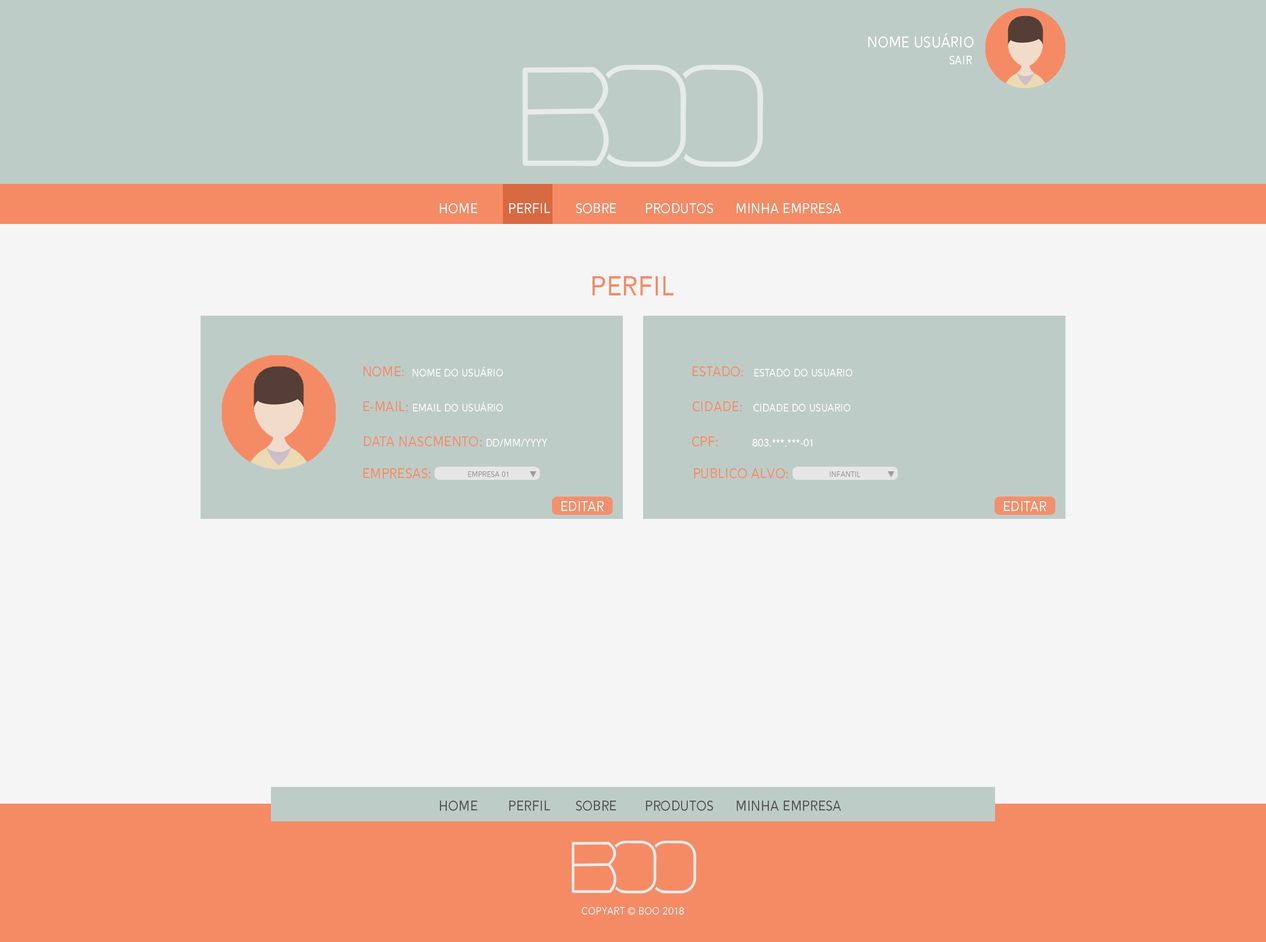
<style>
.page{position:relative;width:1266px;height:942px;background:#f5f5f5}
.page>*{position:absolute;margin:0}
.t1{font:18.3px "Alesand-Regular";color:#fffefe}
.t2{font:14.1px "Alesand-Regular";color:#fffefe}
.t3{font:16.9px "Alesand-Regular";color:#fffefe}
.t4{font:33.8px "Alesand-Regular";color:#f58b65}
.t5{font:16.9px "Alesand-Regular";color:#f58b65}
.t6{font:12.7px "Alesand-Regular";color:#fffefe}
.t7{font:9.2px "Alesand-Regular";color:#9e9b9b}
.t8{font:16.9px "Alesand-Regular";color:#f5f5f5}
.t9{font:16.9px "Alesand-Regular";color:#525050}
.t10{font:12.7px "Alesand-Regular";color:#efefef}
</style>
<div class="page">
<p class="t1" style="left:868px;top:33px;width:106px;height:15px">Nome Usuário</p>
<p class="t2" style="left:950px;top:56px;width:23px;height:9px">Sair</p>
<p class="t3" style="left:440px;top:203px;width:38px;height:10px">HOME</p>
<p class="t3" style="left:509px;top:203px;width:41px;height:10px">PERFIL</p>
<p class="t3" style="left:576px;top:203px;width:40px;height:10px">SOBRE</p>
<p class="t3" style="left:646px;top:203px;width:67px;height:10px">PRODUTOS</p>
<p class="t3" style="left:737px;top:203px;width:104px;height:10px">MINHA EMPRESA</p>
<p class="t4" style="left:593px;top:276px;width:81px;height:19px">PERFIL</p>
<p class="t5" style="left:364px;top:366px;width:40px;height:10px">Nome:</p>
<p class="t6" style="left:413px;top:367px;width:90px;height:9px">nome do usuário</p>
<p class="t5" style="left:692px;top:366px;width:51px;height:10px">eSTADO:</p>
<p class="t6" style="left:755px;top:369px;width:97px;height:7px">ESTADO DO USUARIO</p>
<p class="t5" style="left:363px;top:401px;width:45px;height:10px">E-mail:</p>
<p class="t6" style="left:413px;top:402px;width:90px;height:9px">email do usuário</p>
<p class="t5" style="left:692px;top:401px;width:50px;height:10px">CIDADE:</p>
<p class="t6" style="left:754px;top:404px;width:96px;height:7px">CIDADE DO USUARIO</p>
<p class="t5" style="left:364px;top:436px;width:118px;height:10px">DATA NASCMENTO:</p>
<p class="t5" style="left:692px;top:436px;width:26px;height:10px">CPF:</p>
<p class="t6" style="left:487px;top:438px;width:61px;height:9px">dd/mm/yyyy</p>
<p class="t6" style="left:753px;top:439px;width:59px;height:8px">803.***.***-01</p>
<p class="t5" style="left:363px;top:468px;width:68px;height:10px">EMPRESAS:</p>
<p class="t7" style="left:468px;top:471px;width:41px;height:6px">Empresa 01</p>
<p class="t5" style="left:694px;top:468px;width:94px;height:10px">PUBLICO ALVO:</p>
<p class="t7" style="left:830px;top:471px;width:31px;height:6px">iNFANTIL</p>
<p class="t8" style="left:561px;top:501px;width:43px;height:10px">EDITAR</p>
<p class="t8" style="left:1004px;top:501px;width:42px;height:10px">EDITAR</p>
<p class="t9" style="left:440px;top:800px;width:38px;height:10px">HOME</p>
<p class="t9" style="left:509px;top:800px;width:41px;height:10px">PERFIL</p>
<p class="t9" style="left:576px;top:800px;width:40px;height:10px">SOBRE</p>
<p class="t9" style="left:646px;top:800px;width:67px;height:10px">PRODUTOS</p>
<p class="t9" style="left:737px;top:800px;width:104px;height:10px">MINHA EMPRESA</p>
<p class="t10" style="left:582px;top:907px;width:102px;height:8px">copyart © boo 2018</p>
</div>
